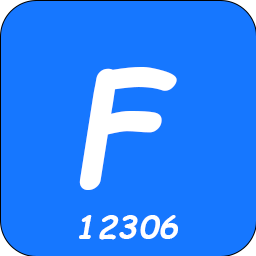
<style>
.page{position:relative;width:256px;height:256px;background:#1677ff}
.page>*{position:absolute;margin:0}
.t1{font:150px "ComicSansMS-BoldItalic";color:#ffffff}
.t2{font:33.3px "ComicSansMS-BoldItalic";color:#ffffff}
</style>
<div class="page">
<p class="t1" style="left:79px;top:67px;width:98px;height:123px">F</p>
<p class="t2" style="left:79px;top:215px;width:99px;height:25px">12306</p>
</div>
